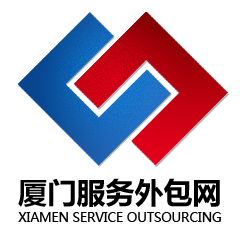
<style>
.page{position:relative;width:240px;height:240px;background:#ffffff}
.page>*{position:absolute;margin:0}
.t1{font:29px "MicrosoftYaHei-Bold";color:#000000}
.t2{font:12.7px "MicrosoftYaHei";color:#000000;text-transform:uppercase}
</style>
<div class="page">
<p class="t1" style="left:18px;top:178px;width:202px;height:29px">厦门服务外包网</p>
<p class="t2" style="left:18px;top:212px;width:203px;height:10px">Xiamen service outsourcing</p>
</div>
